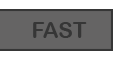
<style>
.page{position:relative;width:120px;height:60px;background:#656464}
.page>*{position:absolute;margin:0}
.t1{font:21.6px "ArialRoundedMTBold";color:#363636}
</style>
<div class="page">
<p class="t1" style="left:33px;top:22px;width:54px;height:16px">FAST</p>
</div>
